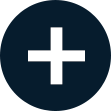
<style>
.page{position:relative;width:111px;height:111px;background:#061c2d}
.page>*{position:absolute;margin:0}
.t1{font:110px "HelveticaNeueCyr-Medium";letter-spacing:0.05em;color:#ffffff}
</style>
<div class="page">
<p class="t1" style="left:28px;top:27px;width:57px;height:58px">+</p>
</div>
